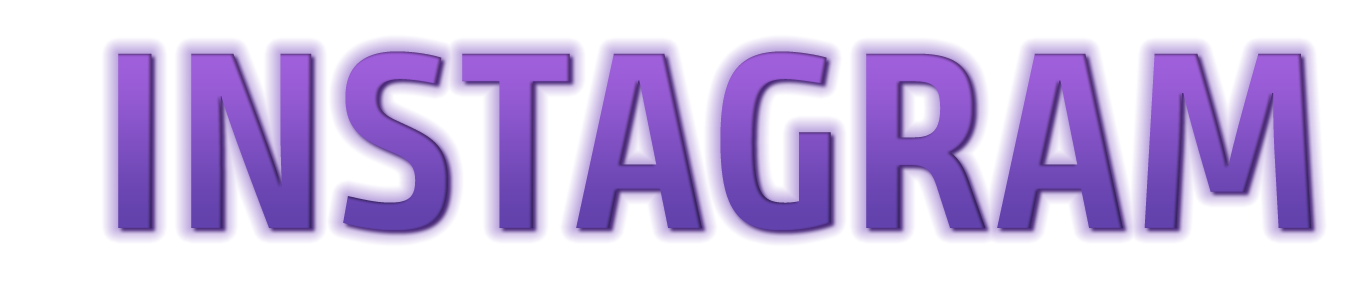
<style>
.page{position:relative;width:1368px;height:291px;background:#ffffff}
.page>*{position:absolute;margin:0}
.t1{font:250px "BundaySans-Bold";letter-spacing:0.025em}
</style>
<div class="page">
<p class="t1" style="left:118px;top:51px;width:1193px;height:180px">INSTAGRAM</p>
</div>
